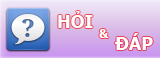
<style>
.page{position:relative;width:160px;height:58px}
.page>*{position:absolute;margin:0}
.t1{font:18px "Tahoma-Bold";color:#ffffff}
.t2{font:12px "Tahoma-Bold";color:#ffffff}
</style>
<div class="page">
<p class="t1" style="left:58px;top:11px;width:35px;height:17px">HỎI</p>
<p class="t2" style="left:99px;top:29px;width:10px;height:9px">&amp;</p>
<p class="t1" style="left:115px;top:33px;width:38px;height:17px">ĐÁP</p>
</div>
